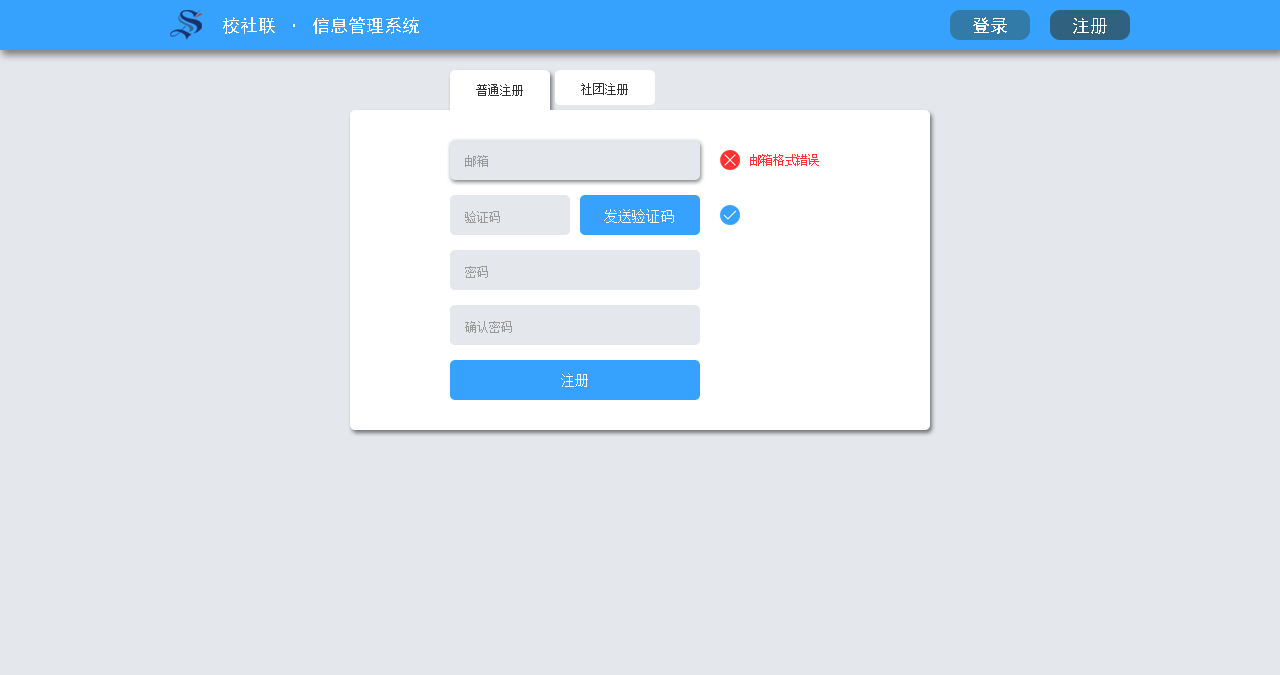
<style>
.page{position:relative;width:1280px;height:675px;background:#e4e8ec}
.page>*{position:absolute;margin:0}
.t1{font:18px "SimHei";color:#ffffff}
.t2{font:12px "SimSun";color:#333333}
.t3{font:12px "SimSun";color:#999999}
.t4{font:12px "SimSun";color:#ff3333}
.t5{font:14px "SimSun";color:#ffffff}
</style>
<div class="page">
<p class="t1" style="left:223px;top:17px;width:196px;height:17px">校社联 · 信息管理系统</p>
<p class="t1" style="left:973px;top:17px;width:34px;height:17px">登录</p>
<p class="t1" style="left:1073px;top:18px;width:34px;height:16px">注册</p>
<p class="t2" style="left:476px;top:84px;width:47px;height:12px">普通注册</p>
<p class="t2" style="left:581px;top:83px;width:47px;height:12px">社团注册</p>
<p class="t3" style="left:465px;top:155px;width:23px;height:12px">邮箱</p>
<p class="t4" style="left:750px;top:154px;width:69px;height:12px">邮箱格式错误</p>
<p class="t5" style="left:604px;top:209px;width:70px;height:14px">发送验证码</p>
<p class="t3" style="left:465px;top:211px;width:35px;height:12px">验证码</p>
<p class="t3" style="left:465px;top:266px;width:23px;height:12px">密码</p>
<p class="t3" style="left:465px;top:321px;width:47px;height:12px">确认密码</p>
<p class="t5" style="left:561px;top:373px;width:27px;height:14px">注册</p>
</div>
